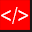
<style>
.page{position:relative;width:32px;height:32px;background:#ff0000}
.page>*{position:absolute;margin:0}
.t1{font:24px "ArialMT";color:#ffffff;scale:0.85 1}
</style>
<div class="page">
<p class="t1" style="left:1px;top:7px;width:28px;height:17px">&lt;/&gt;</p>
</div>
